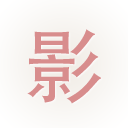
<style>
.page{position:relative;width:128px;height:128px}
.page>*{position:absolute;margin:0}
.t1{font:81px "AdobeHeitiStd-Regular";letter-spacing:0.025em;color:#d88d8d}
</style>
<div class="page">
<p class="t1" style="left:27px;top:29px;width:74px;height:75px">影</p>
</div>
